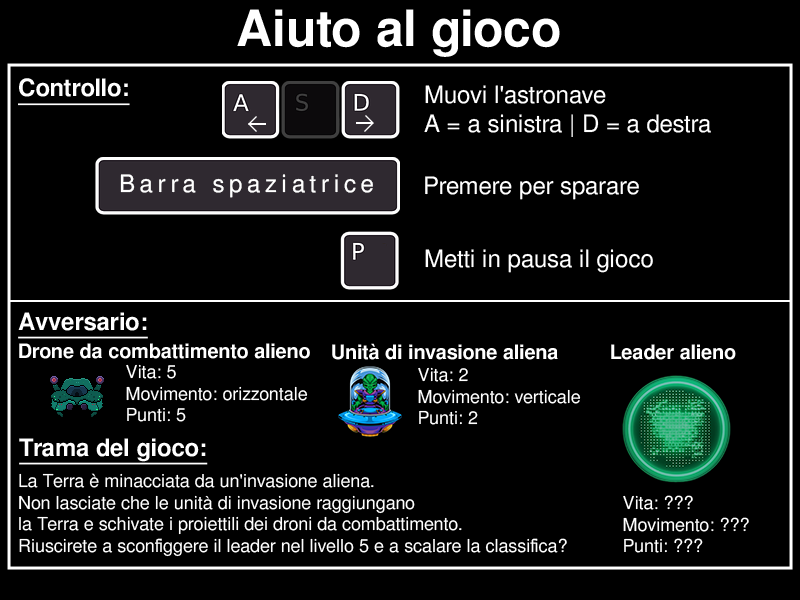
<style>
.page{position:relative;width:800px;height:600px;background:#000000}
.page>*{position:absolute;margin:0}
.t1{font:50px "FreeSansBold";color:#ffffff}
.t2{font:24px "FreeSansBold";color:#ffffff;text-decoration:underline}
.t3{font:24px "FreeSans";color:#ffffff}
.t4{font:24px "FreeSans";letter-spacing:0.2em;color:#ffffff}
.t5{font:20px "FreeSansBold";color:#ffffff}
.t6{font:18px "FreeSans";color:#ffffff}
</style>
<div class="page">
<p class="t1" style="left:237px;top:9px;width:323px;height:48px">Aiuto al gioco</p>
<p class="t2" style="left:18px;top:78px;width:112px;height:28px">Controllo:</p>
<p class="t3" style="left:424px;top:85px;width:287px;height:52px">Muovi l'astronave <br>A = a sinistra | D = a destra</p>
<p class="t4" style="left:120px;top:174px;width:253px;height:24px">Barra spaziatrice</p>
<p class="t3" style="left:425px;top:176px;width:214px;height:24px">Premere per sparare</p>
<p class="t3" style="left:425px;top:249px;width:228px;height:24px">Metti in pausa il gioco</p>
<p class="t2" style="left:18px;top:312px;width:130px;height:27px">Avversario:</p>
<p class="t5" style="left:19px;top:343px;width:291px;height:16px">Drone da combattimento alieno</p>
<p class="t5" style="left:332px;top:343px;width:226px;height:17px">Unità di invasione aliena</p>
<p class="t5" style="left:611px;top:344px;width:125px;height:16px">Leader alieno</p>
<p class="t6" style="left:126px;top:364px;width:182px;height:58px">Vita: 5<br>Movimento: orizzontale<br>Punti: 5</p>
<p class="t6" style="left:418px;top:367px;width:163px;height:58px">Vita: 2<br>Movimento: verticale<br>Punti: 2</p>
<p class="t2" style="left:19px;top:438px;width:189px;height:27px">Trama del gioco:</p>
<p class="t6" style="left:19px;top:473px;width:548px;height:84px">La Terra è minacciata da un'invasione aliena. <br>Non lasciate che le unità di invasione raggiungano <br>la Terra e schivate i proiettili dei droni da combattimento. <br>Riuscirete a sconfiggere il leader nel livello 5 e a scalare la classifica?</p>
<p class="t6" style="left:623px;top:495px;width:126px;height:58px">Vita: ???<br>Movimento: ???<br>Punti: ???</p>
</div>
